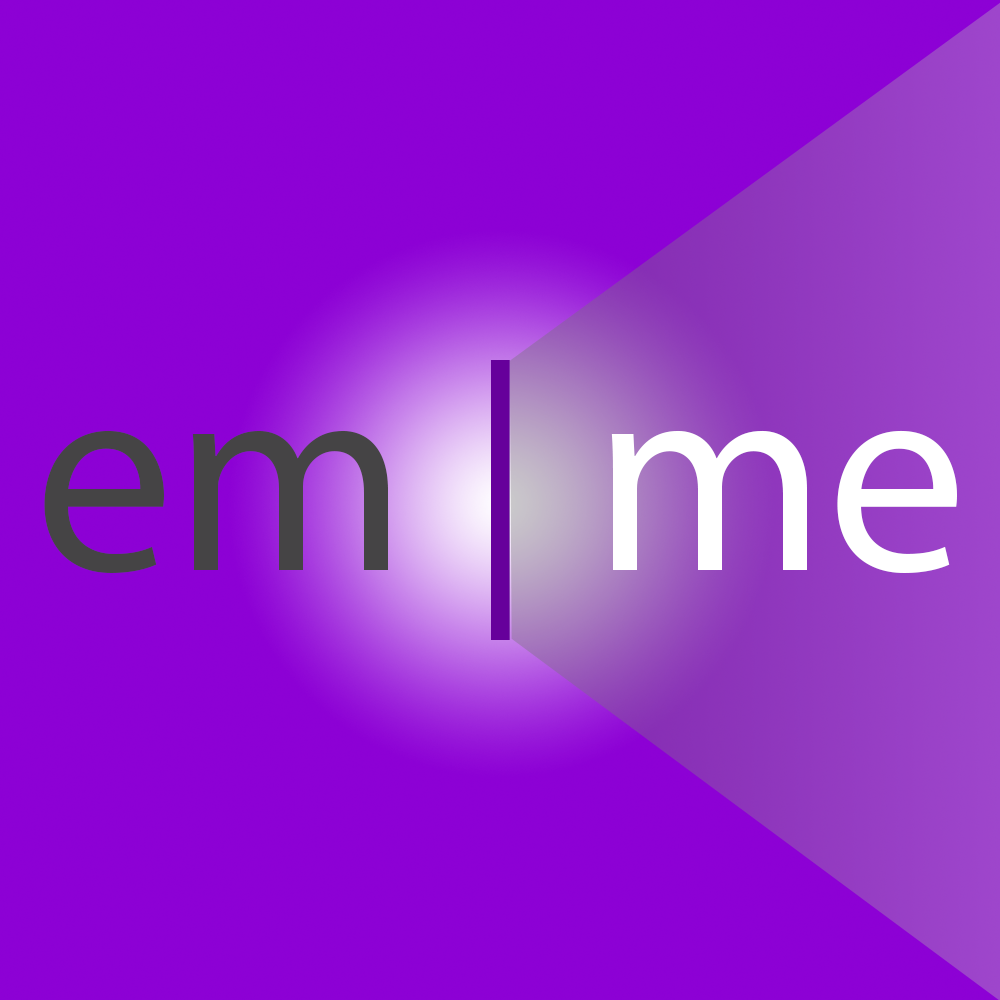
<style>
.page{position:relative;width:1000px;height:1000px;background:#8d01d5}
.page>*{position:absolute;margin:0}
.t1{font:280px "MyriadPro-Regular";color:#454445}
.t2{font:280px "MyriadPro-Regular";color:#66009b}
.t3{font:280px "MyriadPro-Regular";color:#ffffff}
</style>
<div class="page">
<p class="t1" style="left:44px;top:360px;width:913px;height:280px">em <span class="t2">| </span><span class="t3">me</span></p>
</div>
